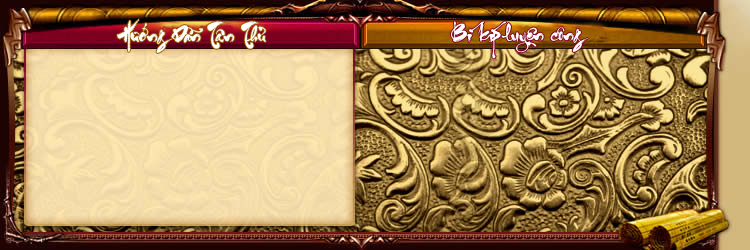
<style>
.page{position:relative;width:750px;height:250px}
.page>*{position:absolute;margin:0}
.t1{font:18px "UTM-ThuPhap-Thien-An";color:#ffffff}
</style>
<div class="page">
<p class="t1" style="left:117px;top:19px;width:149px;height:34px">Hướng Dẫn Tân Thủ</p>
<p class="t1" style="left:450px;top:21px;width:138px;height:38px">Bí kíp luyện công</p>
</div>
